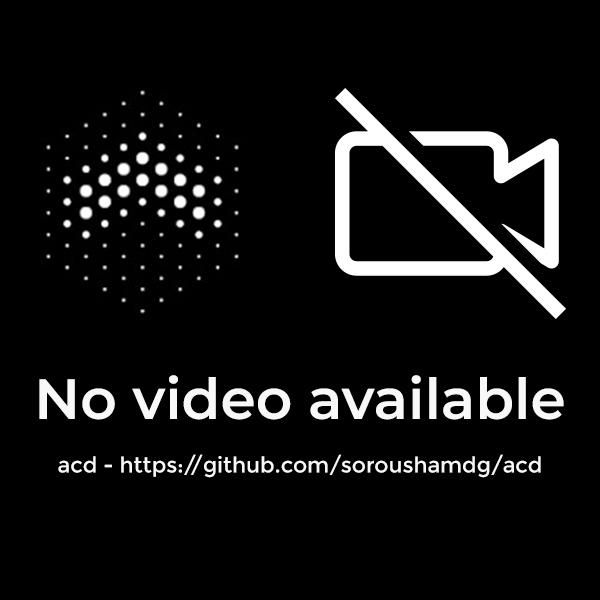
<style>
.page{position:relative;width:600px;height:600px;background:#000000}
.page>*{position:absolute;margin:0}
.t1{font:56.7px "Montserrat-SemiBold";color:#f8f8f8}
.t2{font:21.7px "Montserrat-Regular";color:#f8f8f8}
</style>
<div class="page">
<p class="t1" style="left:39px;top:375px;width:525px;height:45px">No video available</p>
<p class="t2" style="left:58px;top:454px;width:483px;height:24px">acd - https://github.com/soroushamdg/acd</p>
</div>
